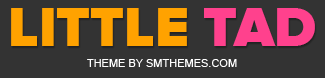
<style>
.page{position:relative;width:325px;height:78px;background:#333333}
.page>*{position:absolute;margin:0}
.t1{font:57px "jbmjelmjnedekkdjnkcjagmnjmidcegc";color:#ffa200;text-transform:uppercase}
.t2{font:57px "jbmjelmjnedekkdjnkcjagmnjmidcegc";color:#ff418d;text-transform:uppercase}
.t3{font:11px "ArialMT";color:#ffffff;text-transform:uppercase}
</style>
<div class="page">
<p class="t1" style="left:11px;top:8px;width:304px;height:38px">Little <span class="t2">tad</span></p>
<p class="t3" style="left:87px;top:59px;width:150px;height:8px">theme by smthemes.com</p>
</div>
